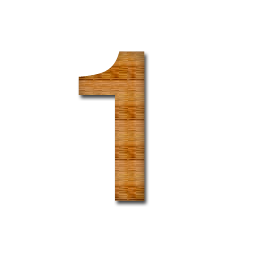
<style>
.page{position:relative;width:256px;height:256px;background:#ffffff}
.page>*{position:absolute;margin:0}
.t1{font:185px "HGSoeiKakugothicUB"}
</style>
<div class="page">
<p class="t1" style="left:78px;top:51px;width:67px;height:150px">１</p>
</div>
